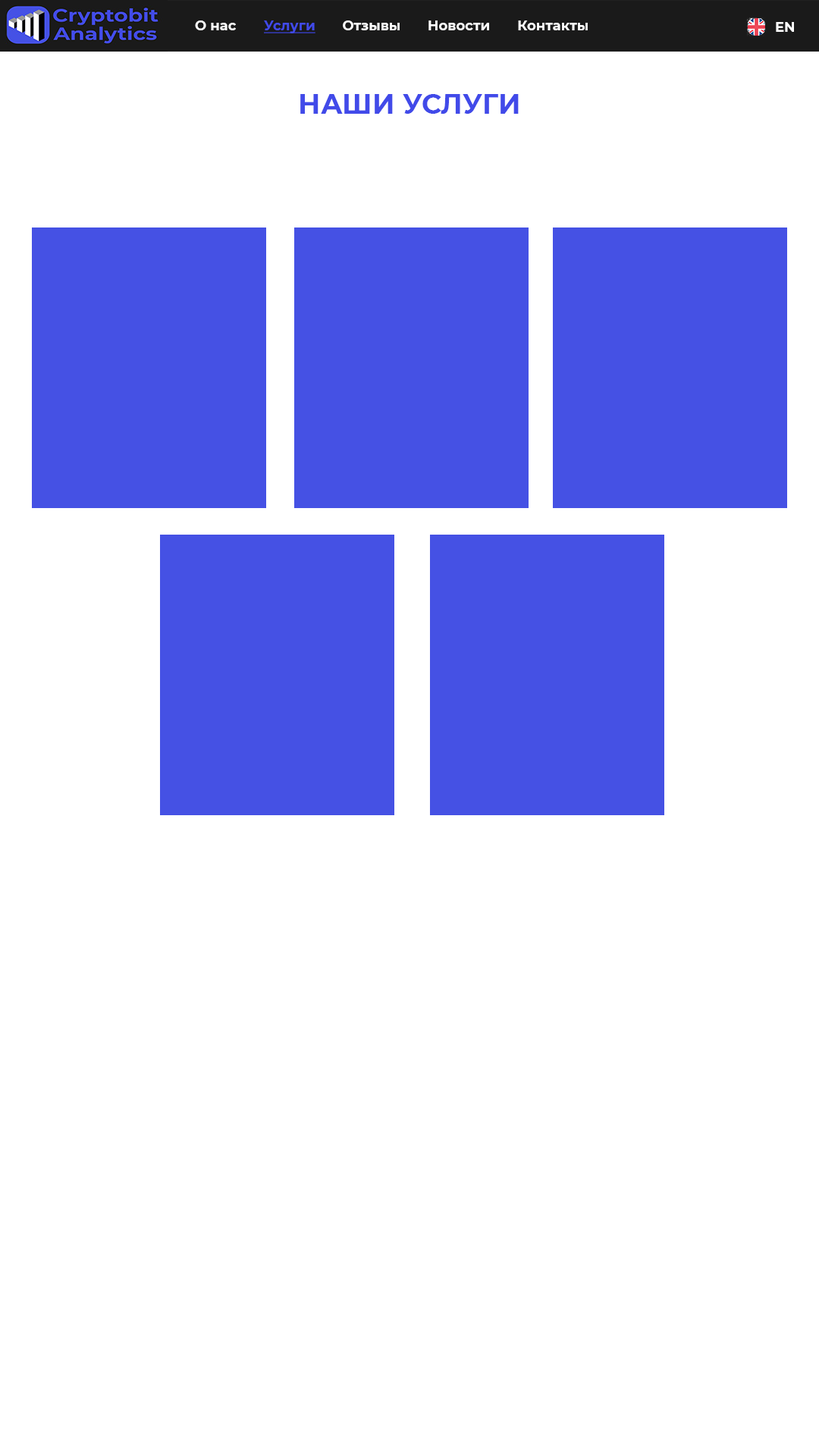
<style>
.page{position:relative;width:819px;height:1456px;background:#ffffff}
.page>*{position:absolute;margin:0}
.t1{font:13.6px "Montserrat-Bold";color:#ffffff}
.t2{font:13.6px "Montserrat-Bold";color:#414ae9;text-decoration:underline}
.t3{font:13.6px "Montserrat-Bold";color:#fefefe}
.t4{font:27.3px "Montserrat-Bold";color:#414ae9}
</style>
<div class="page">
<p class="t1" style="left:195px;top:20px;width:41px;height:10px">О нас</p>
<p class="t2" style="left:264px;top:20px;width:51px;height:13px">Услуги</p>
<p class="t3" style="left:343px;top:20px;width:57px;height:10px">Отзывы</p>
<p class="t3" style="left:428px;top:20px;width:61px;height:10px">Новости</p>
<p class="t3" style="left:518px;top:20px;width:70px;height:10px">Контакты</p>
<p class="t3" style="left:776px;top:22px;width:18px;height:10px">EN</p>
<p class="t4" style="left:300px;top:94px;width:219px;height:20px">НАШИ УСЛУГИ</p>
</div>
